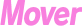
<style>
.page{position:relative;width:82px;height:26px;background:#ffffff}
.page>*{position:absolute;margin:0}
.t1{font:32px "RodinPro-EB";letter-spacing:-0.054em;color:#f880de;font-style:italic;scale:0.85 1}
</style>
<div class="page">
<p class="t1" style="left:0px;top:0px;width:82px;height:26px">Mover</p>
</div>
